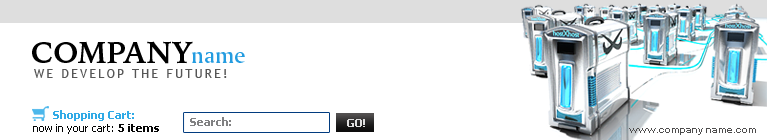
<style>
.page{position:relative;width:767px;height:140px;background:#ffffff}
.page>*{position:absolute;margin:0}
.t1{font:30px "IowanOldStyleBT-Bold";color:#000000;text-transform:uppercase}
.t2{font:24px "AmerigoBT-MediumA";color:#249ce0}
.t3{font:12px "UltraVertex6";letter-spacing:0.2em;color:#565656;text-transform:uppercase}
.t4{font:11px "Tahoma-Bold";color:#30aae6}
.t5{font:11px "Tahoma";color:#040404}
.t6{font:11px "Tahoma-Bold";color:#040404}
.t7{font:11px "Tahoma-Bold";color:#818182}
.t8{font:11px "Tahoma-Bold";color:#e0e0e0;text-transform:uppercase}
.t9{font:10px "Arial-BoldMT";color:#4e4d4d}
</style>
<div class="page">
<p class="t1" style="left:32px;top:41px;width:161px;height:23px">Company</p>
<p class="t2" style="left:192px;top:52px;width:53px;height:11px">name</p>
<p class="t3" style="left:34px;top:69px;width:193px;height:9px">We develop the future!</p>
<p class="t4" style="left:53px;top:110px;width:81px;height:11px">Shopping Cart:</p>
<p class="t5" style="left:33px;top:124px;width:126px;height:10px">now in your cart: <span class="t6">5 items</span></p>
<p class="t7" style="left:190px;top:117px;width:41px;height:9px">Search:</p>
<p class="t8" style="left:347px;top:119px;width:18px;height:8px">GO!</p>
<p class="t9" style="left:629px;top:128px;width:127px;height:7px">www.company name.com</p>
</div>
